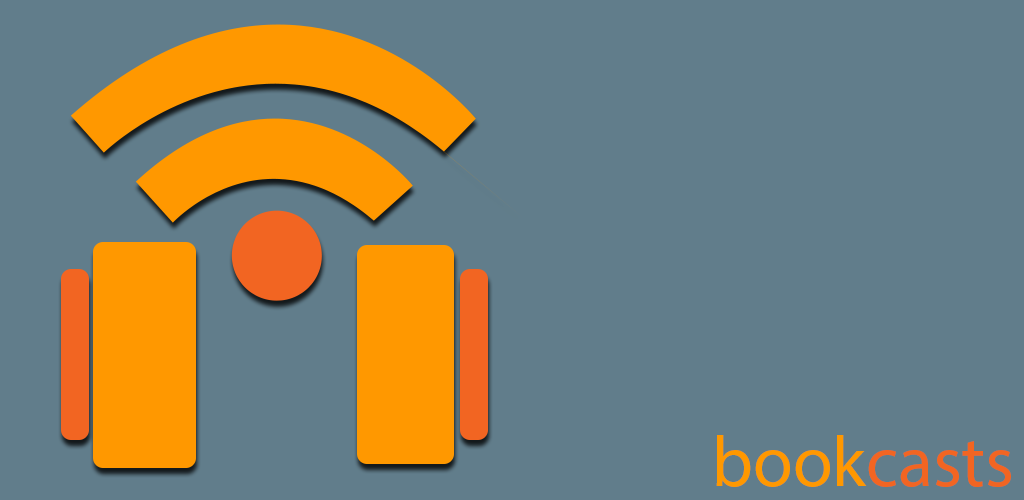
<style>
.page{position:relative;width:1024px;height:500px;background:#617d8b}
.page>*{position:absolute;margin:0}
.t1{font:72px "MyriadPro-Regular";color:#f26522}
.t2{font:72px "MyriadPro-Regular";color:#ff9800}
</style>
<div class="page">
<p class="t1" style="left:716px;top:435px;width:295px;height:52px"><span class="t2">book</span>casts</p>
</div>
